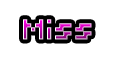
<style>
.page{position:relative;width:118px;height:60px;background:#ffffff}
.page>*{position:absolute;margin:0}
.t1{font:32px "04b03"}
</style>
<div class="page">
<p class="t1" style="left:23px;top:19px;width:69px;height:21px">Miss</p>
<p class="t1" style="left:23px;top:19px;width:69px;height:21px">Miss</p>
<p class="t1" style="left:23px;top:19px;width:69px;height:21px">Miss</p>
</div>
